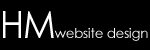
<style>
.page{position:relative;width:150px;height:50px;background:#000000}
.page>*{position:absolute;margin:0}
.t1{font:37.7px "CenturyGothic";letter-spacing:-0.025em;color:#ffffff;scale:0.94 1}
.t2{font:13.6px "CenturyGothic";letter-spacing:-0.025em;color:#ffffff}
</style>
<div class="page">
<p class="t1" style="left:3px;top:11px;width:51px;height:27px">HM</p>
<p class="t2" style="left:54px;top:28px;width:94px;height:13px">website design</p>
</div>
